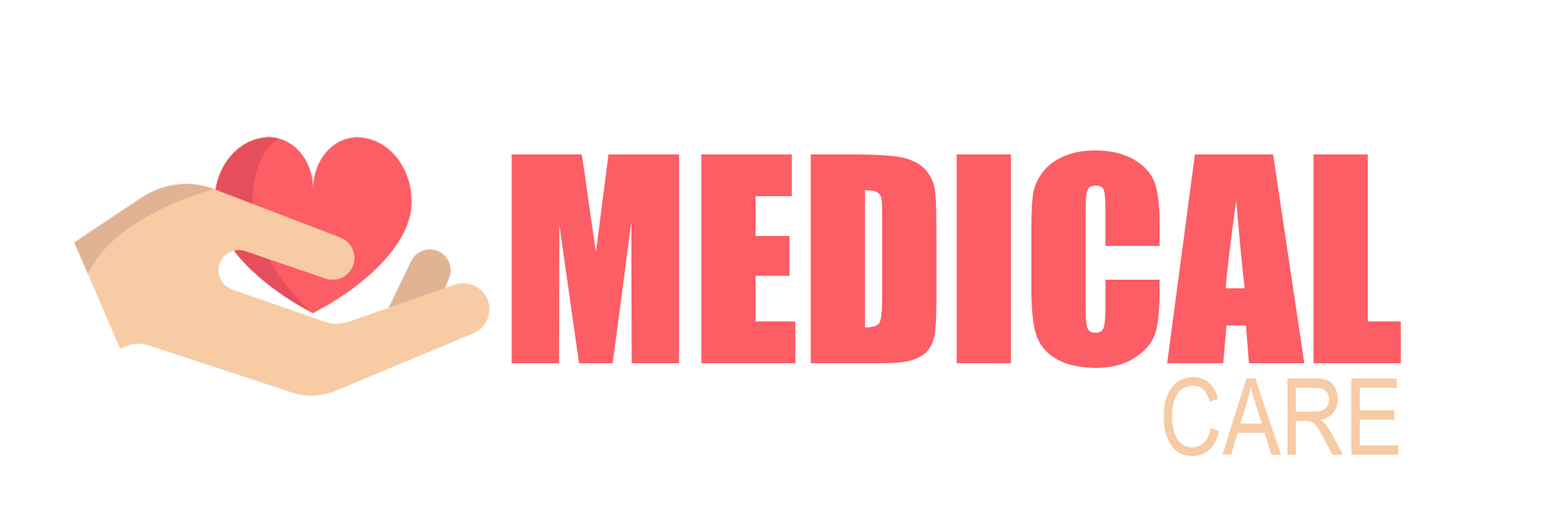
<style>
.page{position:relative;width:1568px;height:517px;background:#ffffff}
.page>*{position:absolute;margin:0}
.t1{font:264.1px "Impact";color:#fd5d65}
.t2{font:107.1px "ArialNarrow";color:#f7cba4}
</style>
<div class="page">
<p class="t1" style="left:511px;top:151px;width:890px;height:217px">MEDICAL</p>
<p class="t2" style="left:1163px;top:377px;width:235px;height:79px">CARE</p>
</div>
